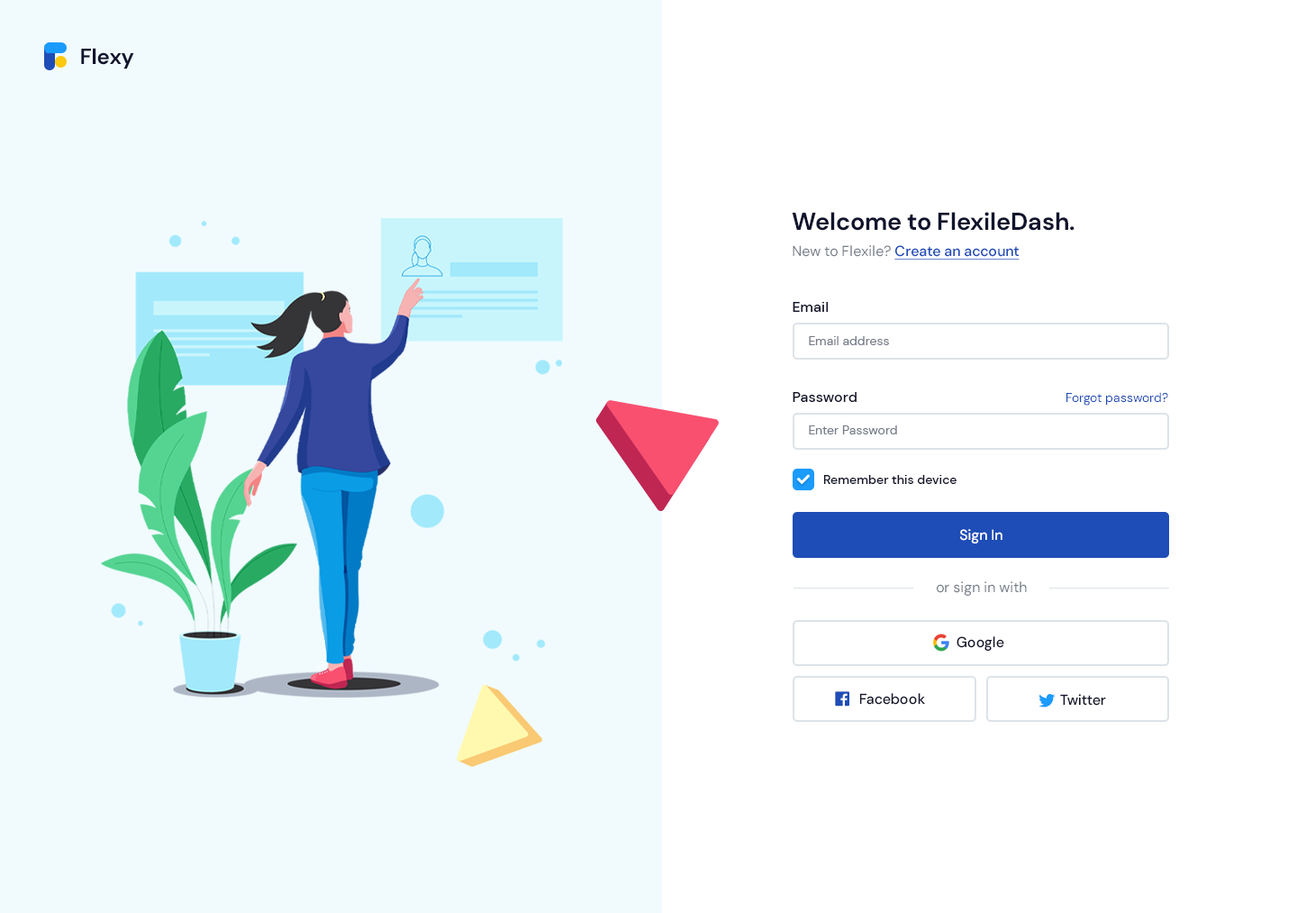
<style>
.page{position:relative;width:1306px;height:913px;background:#ffffff}
.page>*{position:absolute;margin:0}
.t1{font:21.6px "DMSans-Bold";color:#11142d}
.t2{font:24.3px "DMSans-Bold";color:#11142d}
.t3{font:14.4px "DMSans-Medium";color:#1e4db7;text-decoration:underline}
.t4{font:14.4px "DMSans-Regular";color:#777e89}
.t5{font:14.4px "DMSans-Medium";color:#13152a}
.t6{font:12.6px "DMSans-Regular";color:#777d89}
.t7{font:12.6px "DMSans-Regular";color:#1e4db7}
.t8{font:12.6px "DMSans-Medium";color:#13152a}
.t9{font:14.4px "DMSans-Medium";color:#ffffff}
</style>
<div class="page">
<p class="t1" style="left:81px;top:48px;width:53px;height:21px">Flexy</p>
<p class="t2" style="left:792px;top:212px;width:283px;height:19px">Welcome to FlexileDash.</p>
<p class="t3" style="left:793px;top:245px;width:227px;height:14px"><span class="t4">New to Flexile? </span>Create an account</p>
<p class="t5" style="left:793px;top:302px;width:36px;height:10px">Email</p>
<p class="t6" style="left:809px;top:336px;width:80px;height:9px">Email address</p>
<p class="t5" style="left:793px;top:392px;width:64px;height:10px">Password</p>
<p class="t7" style="left:1067px;top:392px;width:102px;height:13px">Forgot password?</p>
<p class="t6" style="left:809px;top:425px;width:88px;height:9px">Enter Password</p>
<p class="t8" style="left:824px;top:475px;width:133px;height:9px">Remember this device</p>
<p class="t9" style="left:960px;top:529px;width:43px;height:14px">Sign In</p>
<p class="t4" style="left:937px;top:581px;width:90px;height:15px">or sign in with</p>
<p class="t5" style="left:957px;top:636px;width:48px;height:15px">Google</p>
<p class="t5" style="left:860px;top:693px;width:65px;height:12px">Facebook</p>
<p class="t5" style="left:1060px;top:694px;width:46px;height:11px">Twitter</p>
</div>
